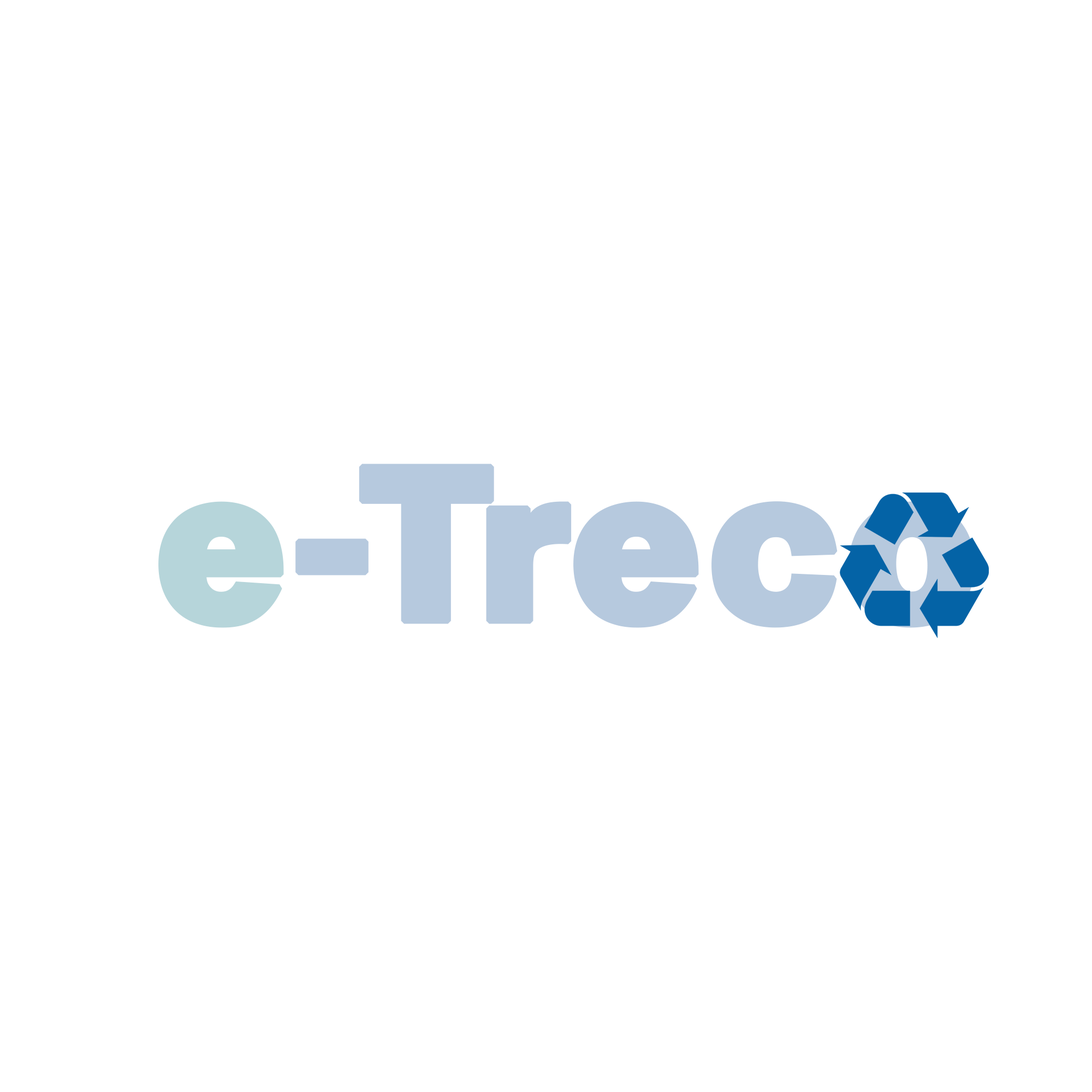
<style>
.page{position:relative;width:1092px;height:1092px;background:#ffffff}
.page>*{position:absolute;margin:0}
.t1{font:218.4px "AGBuchBQ-Bold";color:#b6c9de;font-weight:bold}
</style>
<div class="page">
<p class="t1" style="left:158px;top:464px;width:817px;height:164px">e-Treco</p>
</div>
